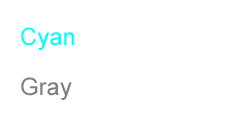
<style>
.page{position:relative;width:240px;height:120px;background:#ffffff}
.page>*{position:absolute;margin:0}
.t1{font:24px "ArialMT";color:#00ffff}
.t2{font:24px "ArialMT";color:#808080}
</style>
<div class="page">
<p class="t1" style="left:21px;top:27px;width:53px;height:23px">Cyan</p>
<p class="t2" style="left:21px;top:77px;width:51px;height:23px">Gray</p>
</div>
